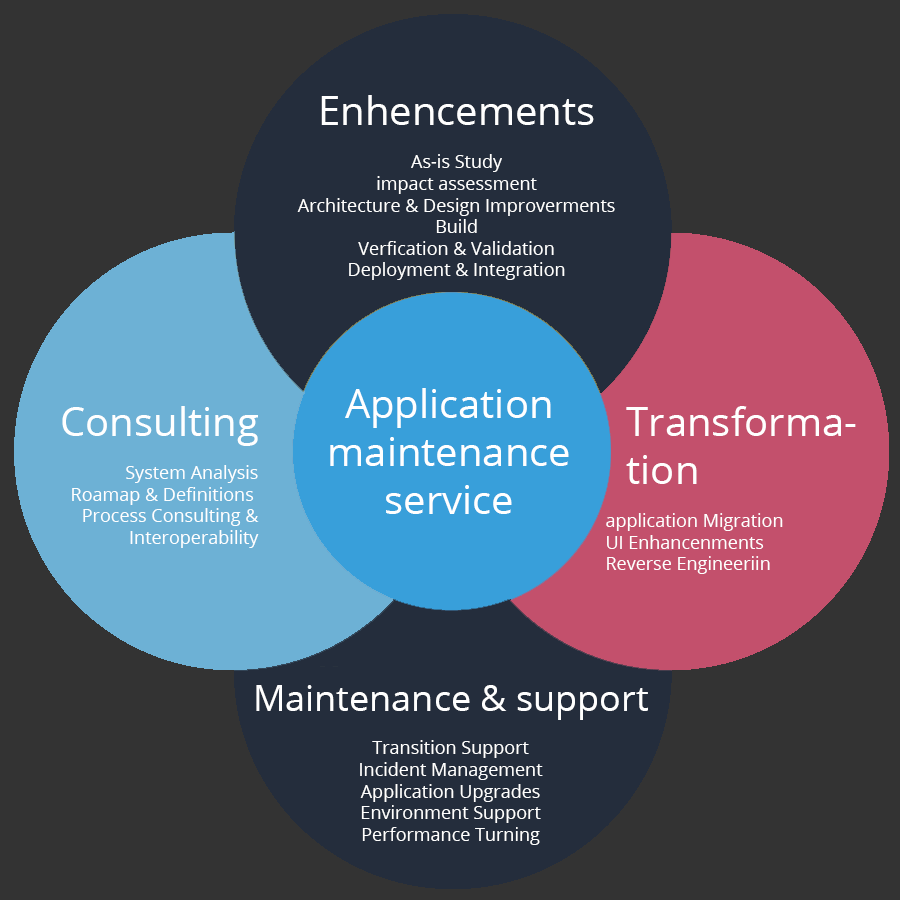
<style>
.page{position:relative;width:900px;height:900px;background:#333333}
.page>*{position:absolute;margin:0}
.t1{font:18px "OpenSans";color:#ffffff}
.t2{font:40px "OpenSans";color:#ffffff}
.t3{font:36px "OpenSans";color:#ffffff}
</style>
<div class="page">
<p class="t1" style="left:297px;top:95px;width:318px;height:185px;text-align:center"><span class="t2">Enhencements<br></span><br>As-is Study<br>impact assessment<br>Architecture &amp; Design Improverments<br>Build<br>Verfication &amp; Validation<br>Deployment &amp; Integration</p>
<p class="t2" style="left:330px;top:388px;width:239px;height:126px;text-align:center">Application<br>maintenance<br>service</p>
<p class="t1" style="left:62px;top:406px;width:197px;height:142px;text-align:right"><span class="t2">Consulting<br></span><br>System Analysis<br>Roamap &amp; Definitions <br>Process Consulting &amp;<br>Interoperability</p>
<p class="t1" style="left:606px;top:406px;width:250px;height:168px"><span class="t2">  Transforma-<br>  tion<br></span><br>application Migration<br>UI Enhancenments<br>Reverse Engineeriin</p>
<p class="t1" style="left:256px;top:685px;width:392px;height:160px;text-align:center"><span class="t3">Maintenance &amp; support<br></span><br>Transition Support<br>Incident Management<br>Application Upgrades<br>Environment Support<br>Performance Turning</p>
</div>
